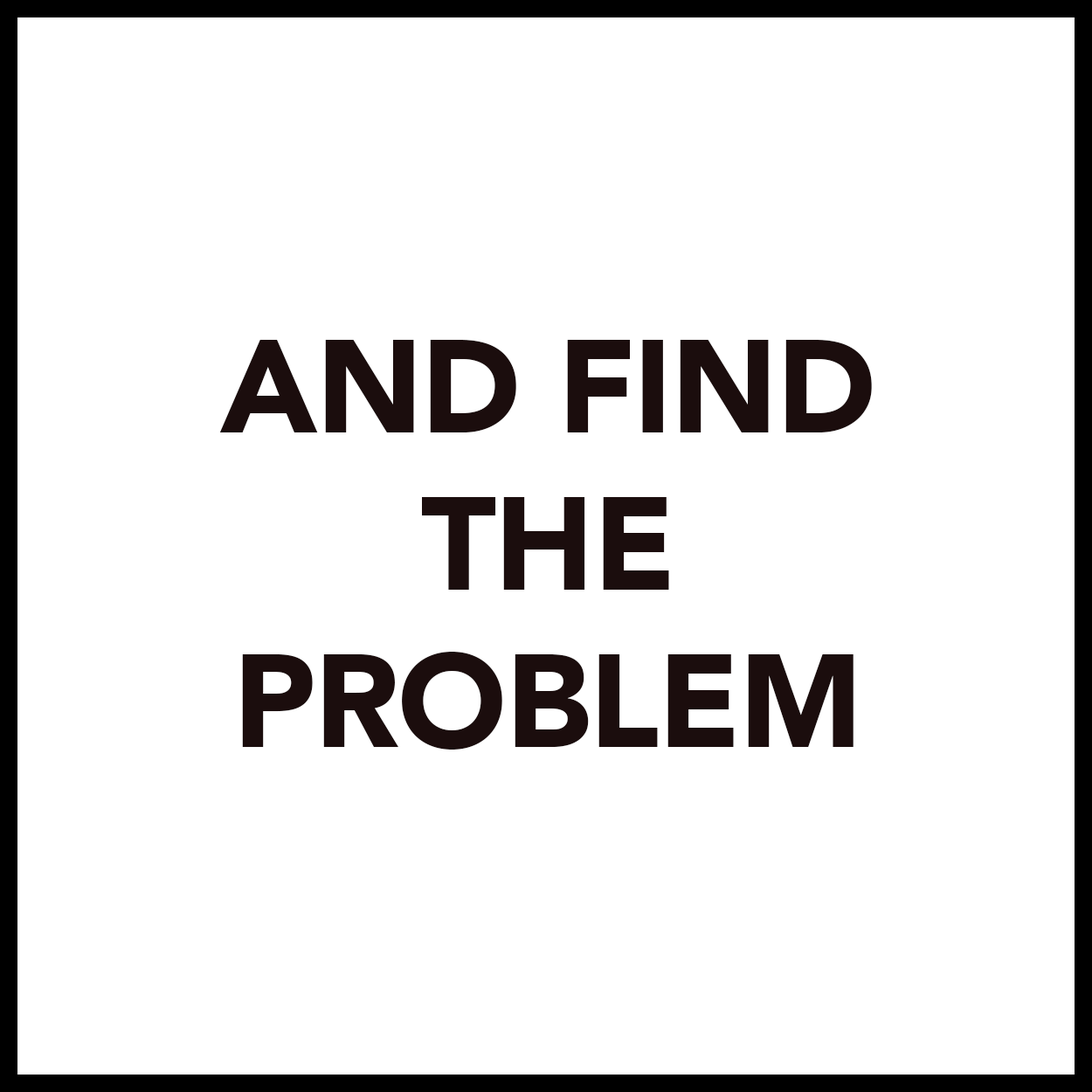
<style>
.page{position:relative;width:1092px;height:1092px;background:#ffffff}
.page>*{position:absolute;margin:0}
.t1{font:131px "Avenir-Black";letter-spacing:-0.01em;color:#1b0d0d}
</style>
<div class="page">
<p class="t1" style="left:219px;top:340px;width:653px;height:410px;text-align:center">AND FIND<br>THE<br>PROBLEM</p>
</div>
